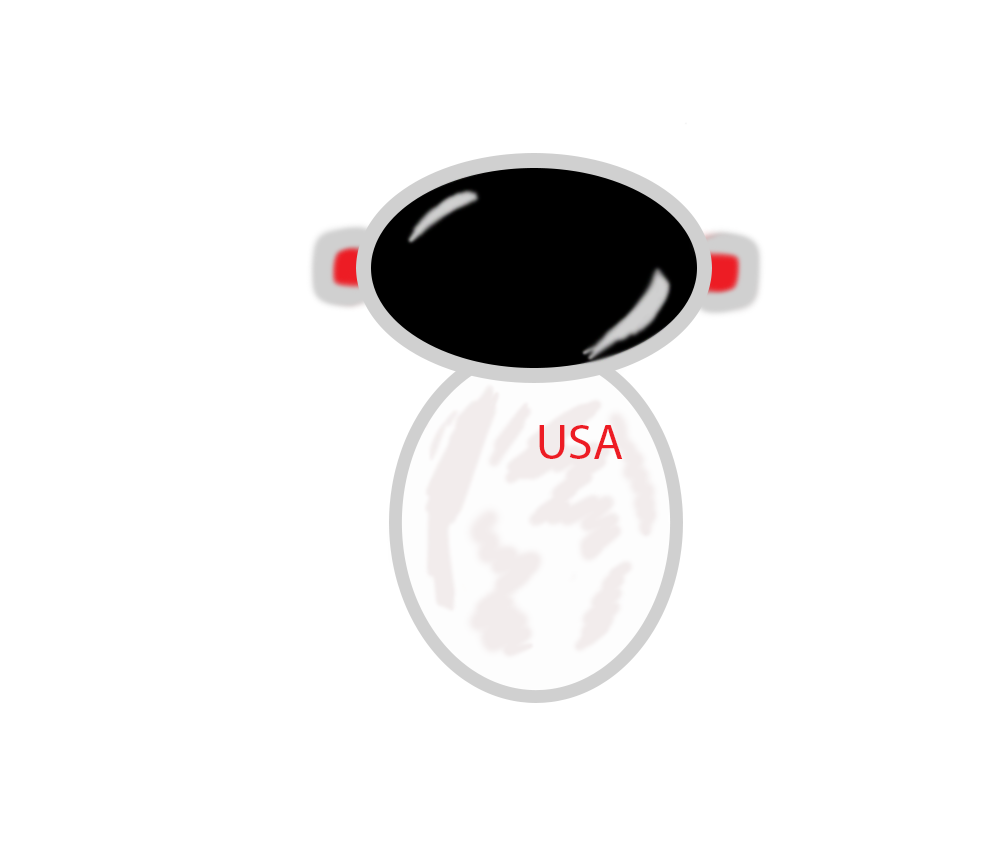
<style>
.page{position:relative;width:1000px;height:850px;background:#ffffff}
.page>*{position:absolute;margin:0}
.t1{font:50px "MyriadPro-Regular";color:#ed1c24}
</style>
<div class="page">
<p class="t1" style="left:539px;top:425px;width:84px;height:34px">USA</p>
</div>
